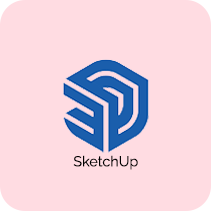
<style>
.page{position:relative;width:211px;height:211px;background:#ffdce2}
.page>*{position:absolute;margin:0}
.t1{font:14.4px "Raleway-Regular";color:#000000}
</style>
<div class="page">
<p class="t1" style="left:73px;top:155px;width:65px;height:15px">SketchUp</p>
</div>
